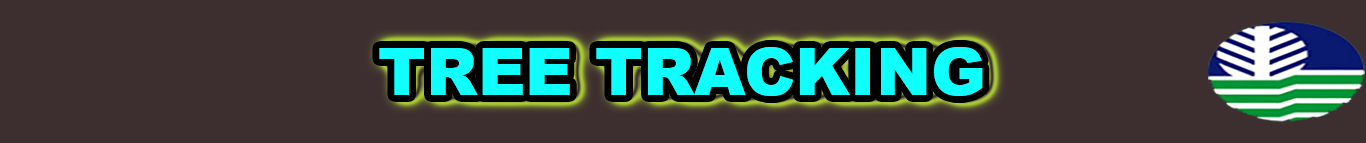
<style>
.page{position:relative;width:1366px;height:143px;background:#3d2e30}
.page>*{position:absolute;margin:0}
.t1{font:66px "Arial-Black";color:#0fffff}
</style>
<div class="page">
<p class="t1" style="left:379px;top:47px;width:604px;height:49px">TREE TRACKING</p>
</div>
